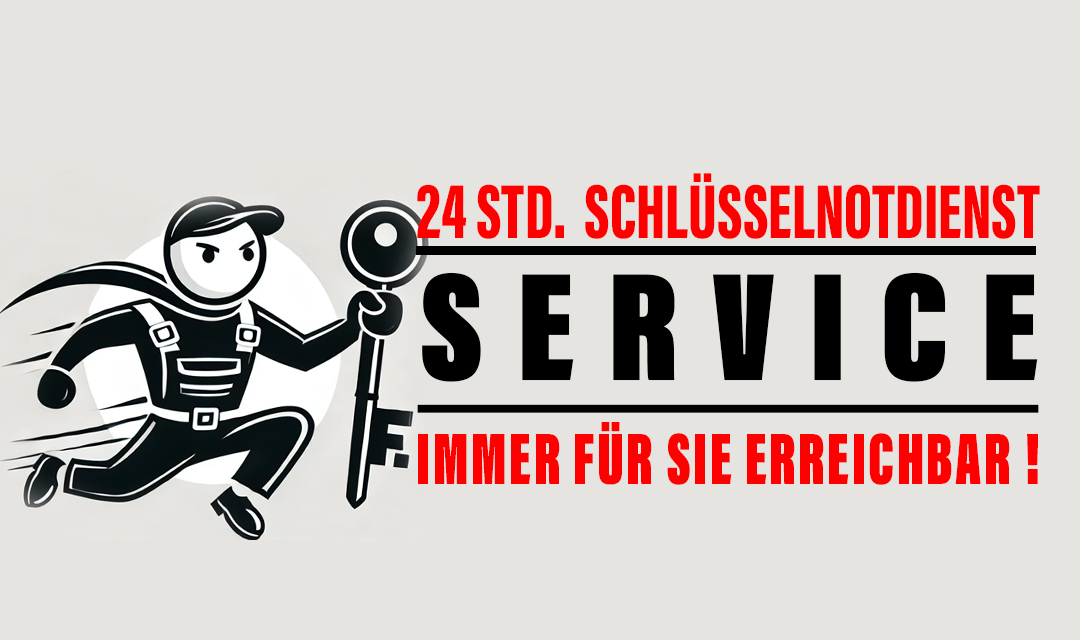
<style>
.page{position:relative;width:1080px;height:640px;background:#e6e4e0}
.page>*{position:absolute;margin:0}
.t1{font:78.7px "AcuminConcept-ExtraCondensedBlack";color:#ff0000;text-transform:uppercase;scale:0.88 1}
.t2{font:158.3px/141.7px "AcuminConcept-ExtraCondensedUltraBlack";letter-spacing:0.2em;color:#000000;text-transform:uppercase;text-decoration:underline;scale:1.05 1}
.t3{font:75px/104.2px "AcuminConcept-ExtraCondensedUltraBlack";letter-spacing:0.04em;color:#ff0000;text-transform:uppercase;scale:0.84 1}
</style>
<div class="page">
<p class="t1" style="left:417px;top:173px;width:623px;height:312px;text-align:center">24 Std.  SchlüsselNotdienst <br><span class="t2">Service<br></span><span class="t3">immer für sie erreichbar !</span></p>
</div>
